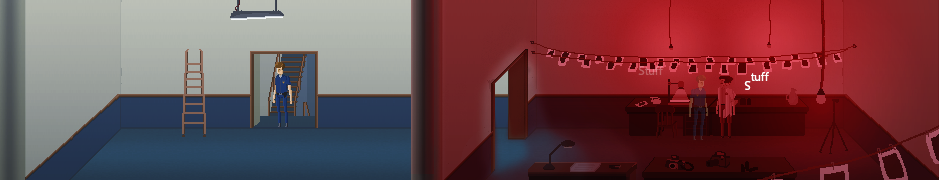
<style>
.page{position:relative;width:939px;height:180px}
.page>*{position:absolute;margin:0}
.t1{font:12px "MyriadHebrew-Regular"}
.t2{font:12px "MyriadHebrew-Regular";color:#ffffff}
</style>
<div class="page">
<p class="t1" style="left:638px;top:66px;width:25px;height:9px">Stuff</p>
<p class="t2" style="left:744px;top:72px;width:25px;height:18px">Stuff</p>
</div>
